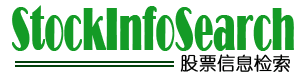
<style>
.page{position:relative;width:300px;height:73px;background:#ffffff}
.page>*{position:absolute;margin:0}
.t1{font:61.3px "Broadway";color:#149b26;font-weight:bold;scale:0.5 1}
.t2{font:18.1px "YouYuan";color:#000100;font-weight:bold}
</style>
<div class="page">
<p class="t1" style="left:12px;top:5px;width:282px;height:46px">StockInfoSearch</p>
<p class="t2" style="left:180px;top:54px;width:110px;height:18px">股票信息检索</p>
</div>
